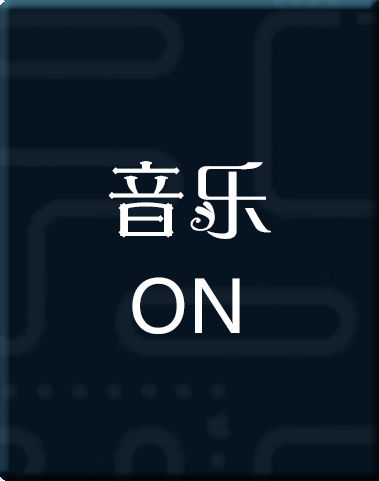
<style>
.page{position:relative;width:379px;height:481px;background:#051420}
.page>*{position:absolute;margin:0}
.t1{font:84.3px "-_-";color:#ffffff}
.t2{font:71.9px "MicrosoftYaHei";color:#ffffff}
</style>
<div class="page">
<p class="t1" style="left:108px;top:161px;width:163px;height:78px">音乐</p>
<p class="t2" style="left:132px;top:277px;width:108px;height:57px">ON</p>
</div>
